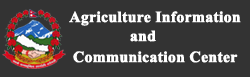
<style>
.page{position:relative;width:250px;height:77px;background:#333333}
.page>*{position:absolute;margin:0}
.t1{font:15.5px "TimesNewRomanPS-BoldMT";color:#ffffff;font-weight:bold}
</style>
<div class="page">
<p class="t1" style="left:69px;top:11px;width:172px;height:15px">Agriculture Information</p>
<p class="t1" style="left:130px;top:30px;width:26px;height:12px">and</p>
<p class="t1" style="left:73px;top:51px;width:165px;height:12px">Communication Center</p>
</div>
